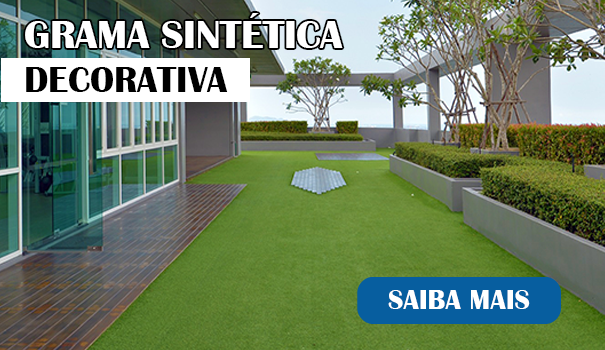
<style>
.page{position:relative;width:605px;height:350px}
.page>*{position:absolute;margin:0}
.t1{font:40.5px "BritannicBold";color:#ffffff}
.t2{font:36.9px "BritannicBold";color:#000000}
.t3{font:28.5px "BritannicBold";color:#ffffff}
</style>
<div class="page">
<p class="t1" style="left:25px;top:13px;width:318px;height:35px">GRAMA SINTÉTICA</p>
<p class="t2" style="left:26px;top:67px;width:202px;height:25px">DECORATIVA</p>
<p class="t3" style="left:388px;top:290px;width:142px;height:19px">SAIBA MAIS</p>
</div>
